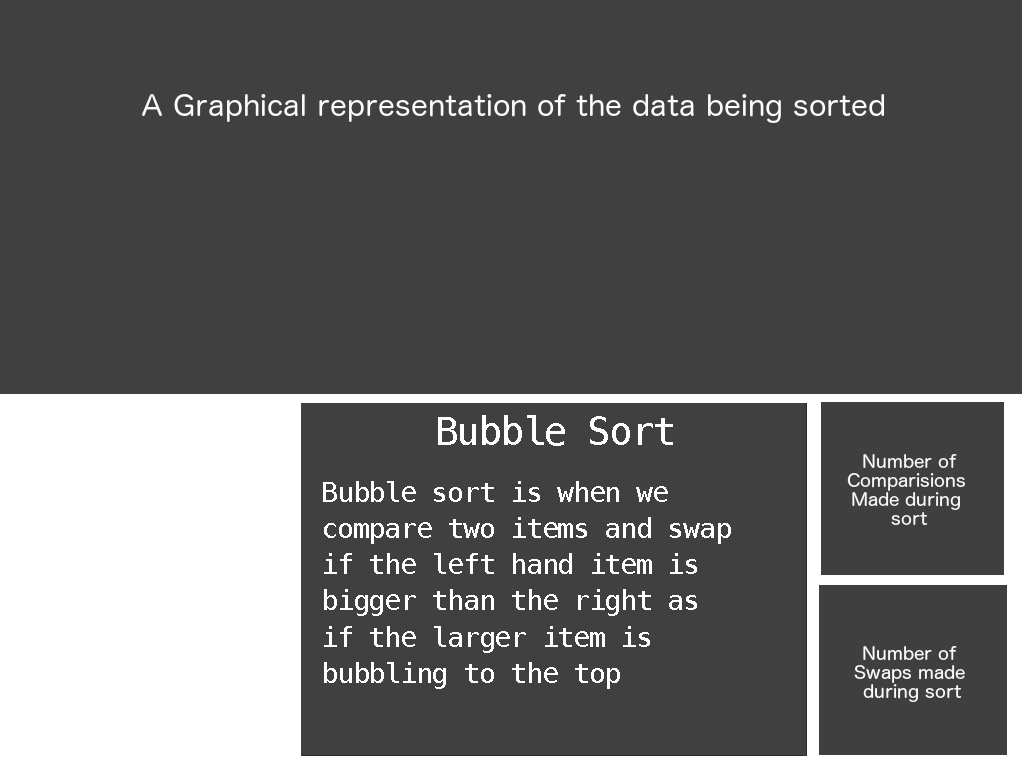
<style>
.page{position:relative;width:1024px;height:768px;background:#404040}
.page>*{position:absolute;margin:0}
.t1{font:66.6px "Menlo-Regular";letter-spacing:-0.04em;color:#fefefe}
.t2{font:48px/36px "Menlo-Regular";letter-spacing:-0.04em;color:#fefefe}
.t3{font:48px/13px "Menlo-Regular";letter-spacing:-0.04em;color:#fefefe}
</style>
<div class="page">
<p class="t1" style="left:438px;top:415px;width:235px;height:31px">Bubble Sort</p>
<p class="t2" style="left:323px;top:481px;width:408px;height:208px"><span class="t3">Bubble sort is when we <br></span>compare two items and swap <br>if the left hand item is <br>bigger than the right as <br>if the larger item is <br>bubbling to the top</p>
</div>
